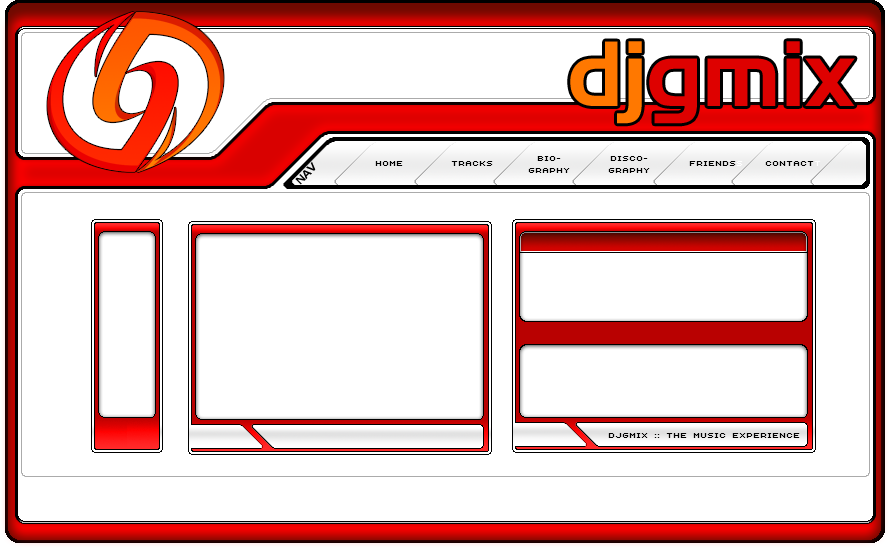
<style>
.page{position:relative;width:889px;height:548px;background:#ffffff}
.page>*{position:absolute;margin:0}
.t1{font:90px "HandelGothicBT-Regular";color:#de0100}
.t2{font:90px "HandelGothicBT-Regular";color:#ff7800}
.t3{font:11px "HandelGothicBT-Regular";color:#000000}
.t4{font:10px "AuXDotBitC";color:#000000}
.t5{font:10px "AuXDotBitC";color:#ffffff}
</style>
<div class="page">
<p class="t1" style="left:570px;top:41px;width:285px;height:83px"><span class="t2">dj</span>gmix</p>
<p class="t3" style="left:295px;top:161px;width:21px;height:24px;rotate:-45deg">NAV</p>
<p class="t4" style="left:375px;top:161px;width:28px;height:5px">HOME</p>
<p class="t4" style="left:451px;top:161px;width:42px;height:5px">TRACKS</p>
<p class="t4" style="left:528px;top:156px;width:42px;height:17px;text-align:center">BIO-<br>GRAPHY</p>
<p class="t4" style="left:608px;top:156px;width:42px;height:17px;text-align:center">DISCO-<br>GRAPHY</p>
<p class="t4" style="left:689px;top:161px;width:54px;height:5px">FRIENDS<span class="t5">S</span></p>
<p class="t4" style="left:765px;top:161px;width:56px;height:5px">CONTACT<span class="t5">T</span></p>
<p class="t4" style="left:608px;top:433px;width:192px;height:5px">DJGMIX :: THE MUSIC EXPERIENCE</p>
</div>
